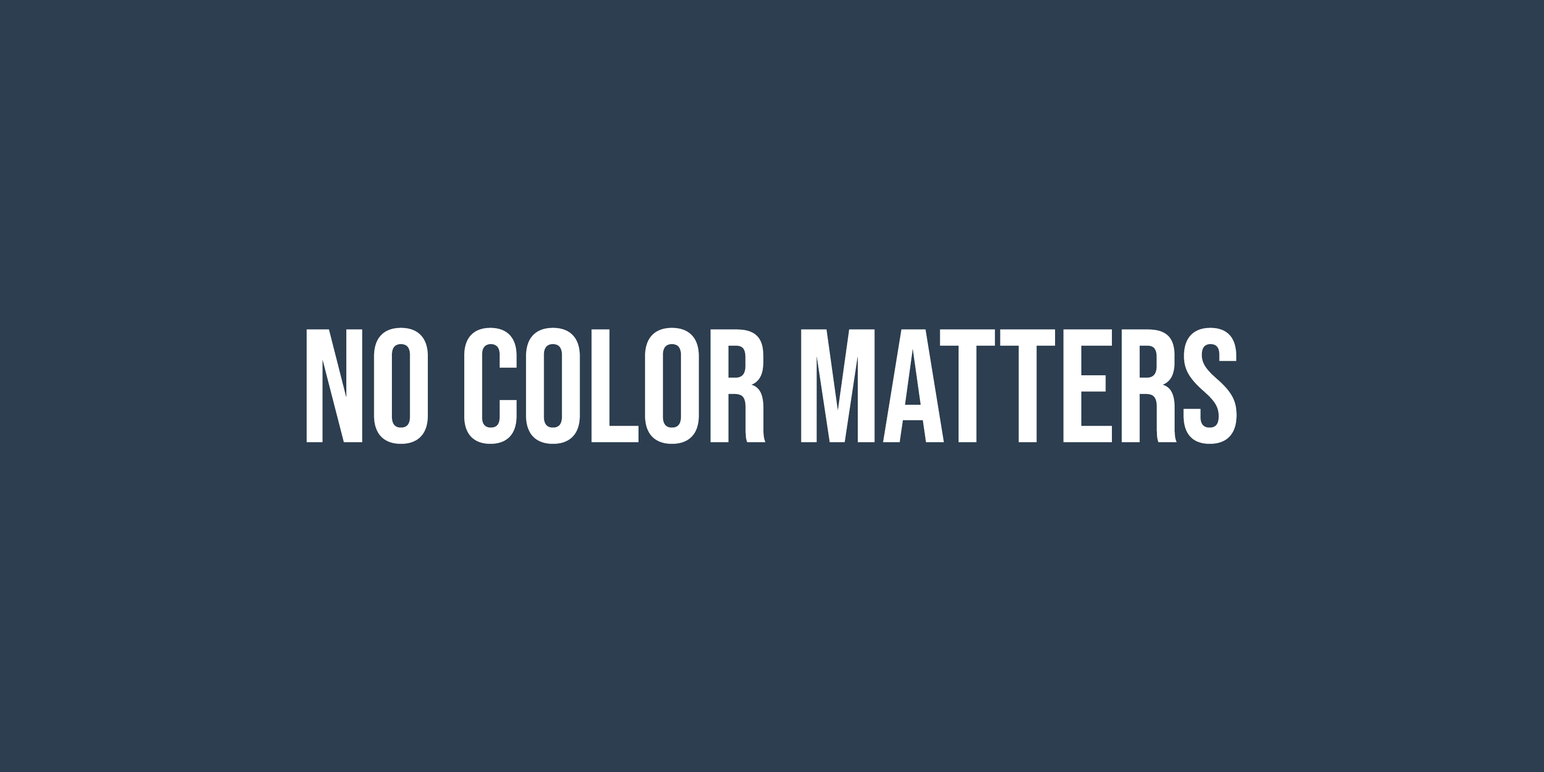
<style>
.page{position:relative;width:1544px;height:772px;background:#2c3e50}
.page>*{position:absolute;margin:0}
.t1{font:160.9px "BebasNeue-Regular";color:#ffffff}
</style>
<div class="page">
<p class="t1" style="left:307px;top:328px;width:930px;height:116px">no color matters</p>
</div>
